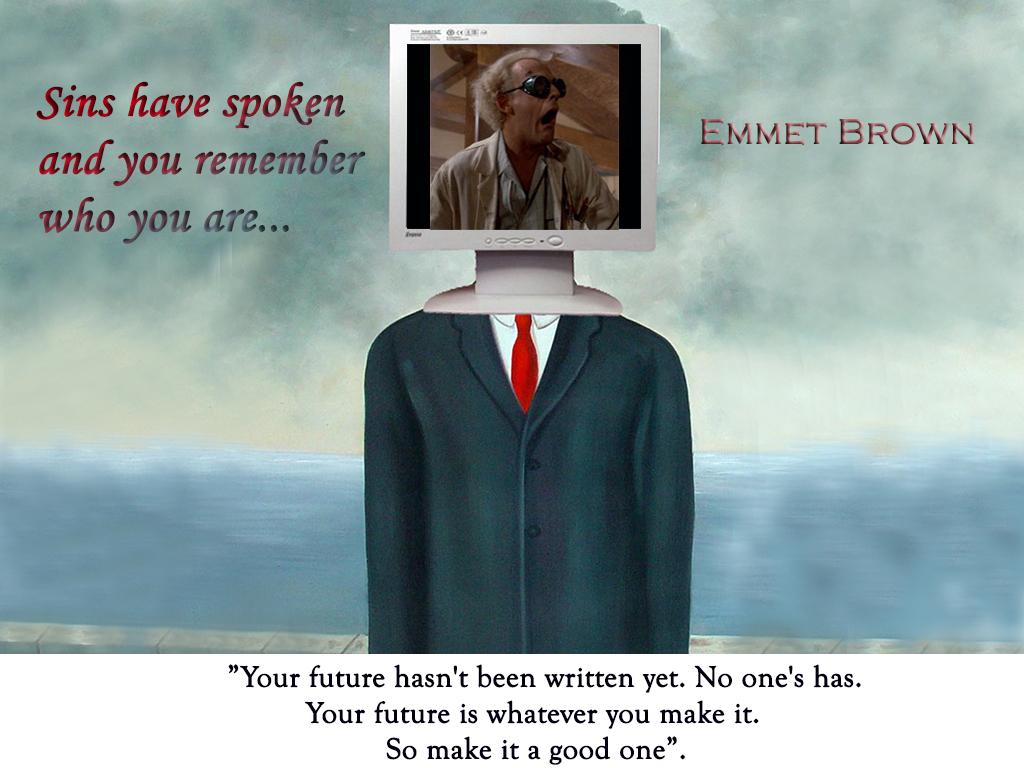
<style>
.page{position:relative;width:1024px;height:768px}
.page>*{position:absolute;margin:0}
.t1{font:48px "MonotypeCorsiva";font-weight:bold}
.t2{font:36px "CopperplateGothic-Light";font-weight:bold}
.t3{font:30px "GoudyOldStyleT-Regular";color:#000010;font-weight:bold}
.t4{font:30px "MonotypeCorsiva";color:#72000b;font-weight:bold}
</style>
<div class="page">
<p class="t1" style="left:36px;top:81px;width:330px;height:163px">Sins have spoken<br>and you remember<br>who you are...</p>
<p class="t2" style="left:701px;top:117px;width:274px;height:29px">Emmet Brown</p>
<p class="t3" style="left:228px;top:664px;width:633px;height:101px"><span class="t4">        </span>”Your future hasn't been written yet. No one's has. <br>       Your future is whatever you make it. <br>          So make it a good one”.</p>
</div>
